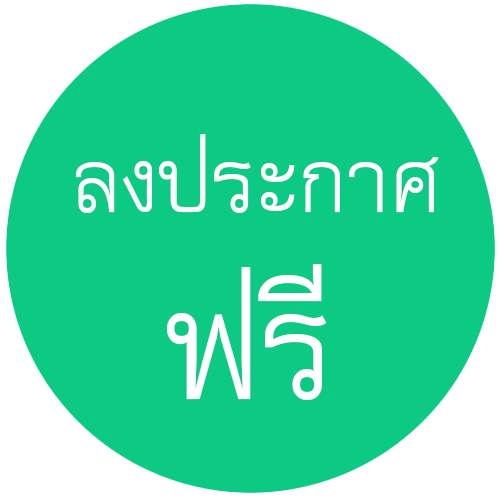
<style>
.page{position:relative;width:500px;height:500px;background:#0cc984}
.page>*{position:absolute;margin:0}
.t1{font:125.8px "DSNPreeCha";color:#ffffff}
.t2{font:212.6px "DSNPreeCha";color:#ffffff}
</style>
<div class="page">
<p class="t1" style="left:76px;top:134px;width:363px;height:79px">ลงประกาศ</p>
<p class="t2" style="left:167px;top:264px;width:160px;height:136px">ฟรี</p>
</div>
